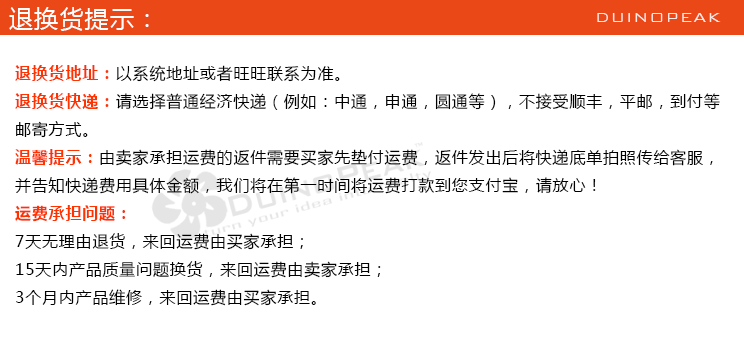
<style>
.page{position:relative;width:744px;height:337px;background:#ffffff}
.page>*{position:absolute;margin:0}
.t1{font:24px "MicrosoftYaHei";letter-spacing:0.05em;color:#ffffff}
.t2{font:18px "BankGothicBT-Light";letter-spacing:0.05em;color:#ffffff}
.t3{font:16px "MicrosoftYaHei";letter-spacing:0.05em;color:#000000}
.t4{font:16px "MicrosoftYaHei-Bold";letter-spacing:0.05em;color:#ff3300}
</style>
<div class="page">
<p class="t1" style="left:9px;top:7px;width:140px;height:24px">退换货提示：</p>
<p class="t2" style="left:597px;top:13px;width:124px;height:9px;opacity:0.85">DUINOPEAK</p>
<p class="t3" style="left:15px;top:65px;width:705px;height:241px"><span class="t4">退换货地址：</span>以系统地址或者旺旺联系为准。<br><span class="t4">退换货快递：</span>请选择普通经济快递（例如：中通，申通，圆通等），不接受顺丰，平邮，到付等<br>邮寄方式。<br><span class="t4">温馨提示：</span>由卖家承担运费的返件需要买家先垫付运费，返件发出后将快递底单拍照传给客服，<br>并告知快递费用具体金额，我们将在第一时间将运费打款到您支付宝，请放心！<br><span class="t4">运费承担问题：<br></span>7天无理由退货，来回运费由买家承担；<br>15天内产品质量问题换货，来回运费由卖家承担；<br>3个月内产品维修，来回运费由买家承担。</p>
</div>
